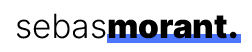
<style>
.page{position:relative;width:252px;height:52px;background:#ffffff}
.page>*{position:absolute;margin:0}
.t1{font:33.3px "Inter-Black";color:#000000}
.t2{font:33.3px "Inter-Light";color:#000000}
</style>
<div class="page">
<p class="t1" style="left:17px;top:13px;width:220px;height:26px"><span class="t2">sebas</span>morant.</p>
</div>
